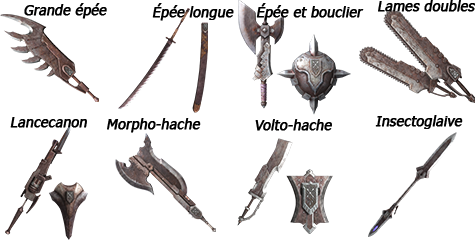
<style>
.page{position:relative;width:475px;height:240px;background:#ffffff}
.page>*{position:absolute;margin:0}
.t1{font:13.9px "Tahoma";color:#000000;font-weight:bold;font-style:italic}
.t2{font:14px "Tahoma";color:#000000;font-weight:bold;font-style:italic}
</style>
<div class="page">
<p class="t1" style="left:24px;top:3px;width:83px;height:16px">Grande épée</p>
<p class="t2" style="left:152px;top:3px;width:82px;height:18px">Épée longue</p>
<p class="t1" style="left:256px;top:3px;width:108px;height:18px">Épée et bouclier</p>
<p class="t2" style="left:378px;top:0px;width:97px;height:12px">Lames doubles</p>
<p class="t2" style="left:10px;top:117px;width:77px;height:11px">Lancecanon</p>
<p class="t2" style="left:107px;top:118px;width:94px;height:15px">Morpho-hache</p>
<p class="t2" style="left:255px;top:119px;width:77px;height:12px">Volto-hache</p>
<p class="t2" style="left:375px;top:115px;width:88px;height:14px">Insectoglaive</p>
</div>
